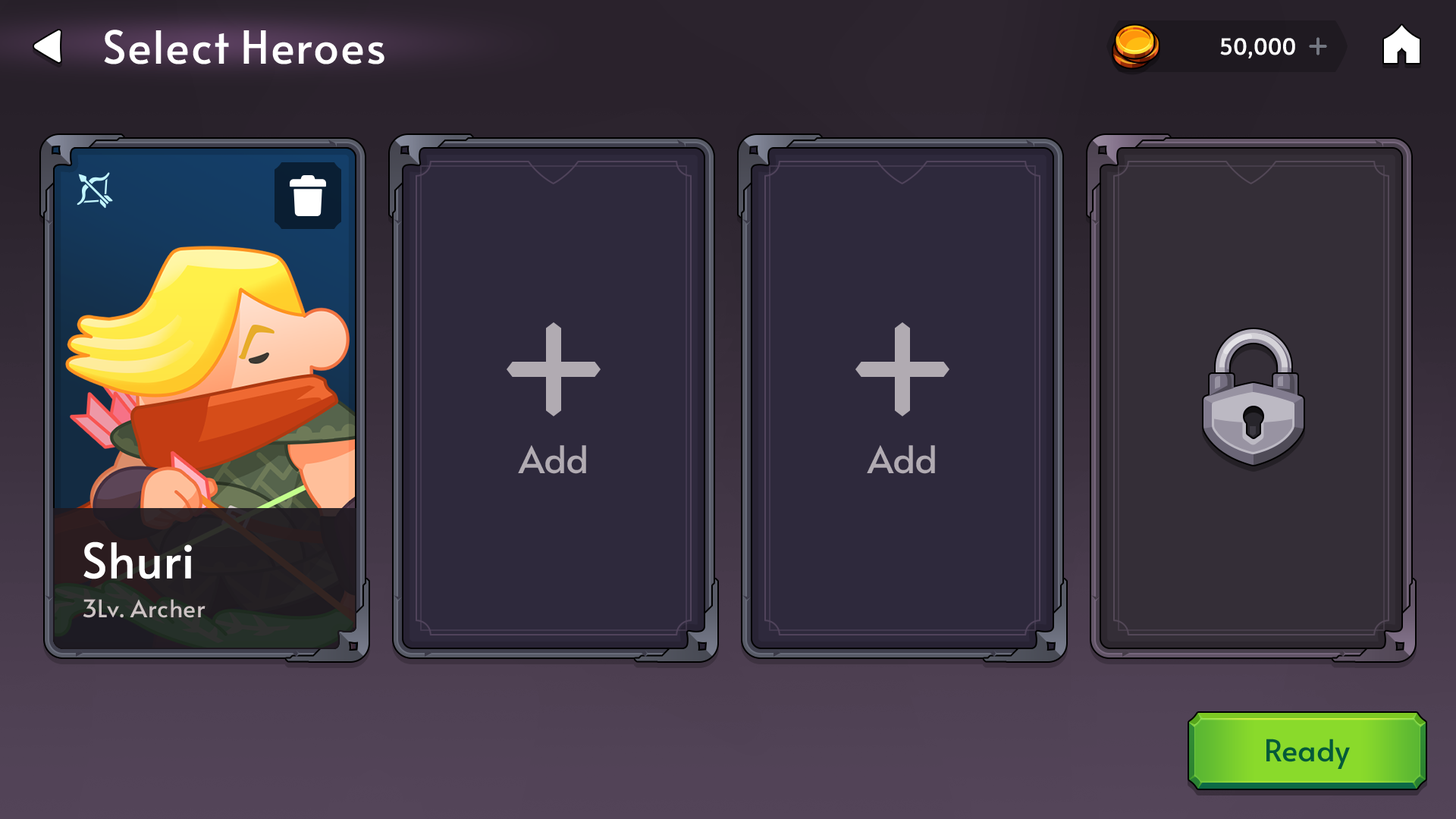
<style>
.page{position:relative;width:1456px;height:819px}
.page>*{position:absolute;margin:0}
.t1{font:45.5px "Alata-Regular";color:#ffffff}
.t2{font:21.9px "Alata-Regular";letter-spacing:-0.025em;color:#ffffff;font-weight:bold}
.t3{font:37.9px "Alata-Regular";color:#b1abb2}
.t4{font:48.5px "Alata-Regular";letter-spacing:-0.01em;color:#ffffff}
.t5{font:24.3px "Alata-Regular";letter-spacing:-0.01em;color:#cdc3c4}
.t6{font:30.3px "Alata-Regular";color:#045a39}
</style>
<div class="page">
<p class="t1" style="left:104px;top:30px;width:280px;height:34px">Select Heroes</p>
<p class="t2" style="left:1220px;top:38px;width:75px;height:20px">50,000</p>
<p class="t3" style="left:518px;top:445px;width:68px;height:29px">Add</p>
<p class="t3" style="left:867px;top:445px;width:68px;height:29px">Add</p>
<p class="t4" style="left:83px;top:541px;width:109px;height:38px">Shuri</p>
<p class="t5" style="left:83px;top:599px;width:123px;height:19px">3Lv. Archer</p>
<p class="t6" style="left:1266px;top:739px;width:84px;height:30px">Ready</p>
</div>
